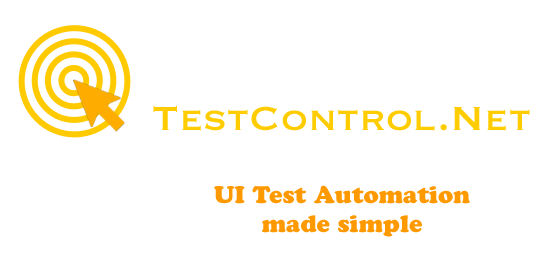
<style>
.page{position:relative;width:540px;height:264px;background:#ffffff}
.page>*{position:absolute;margin:0}
.t1{font:43.8px "Copperplate";color:#ffcc00}
.t2{font:24px "CooperBlackStd";color:#ff9900}
</style>
<div class="page">
<p class="t1" style="left:153px;top:106px;width:377px;height:25px">TestControl.Net</p>
<p class="t2" style="left:214px;top:185px;width:256px;height:52px;text-align:center">UI Test Automation<br>made simple</p>
</div>
